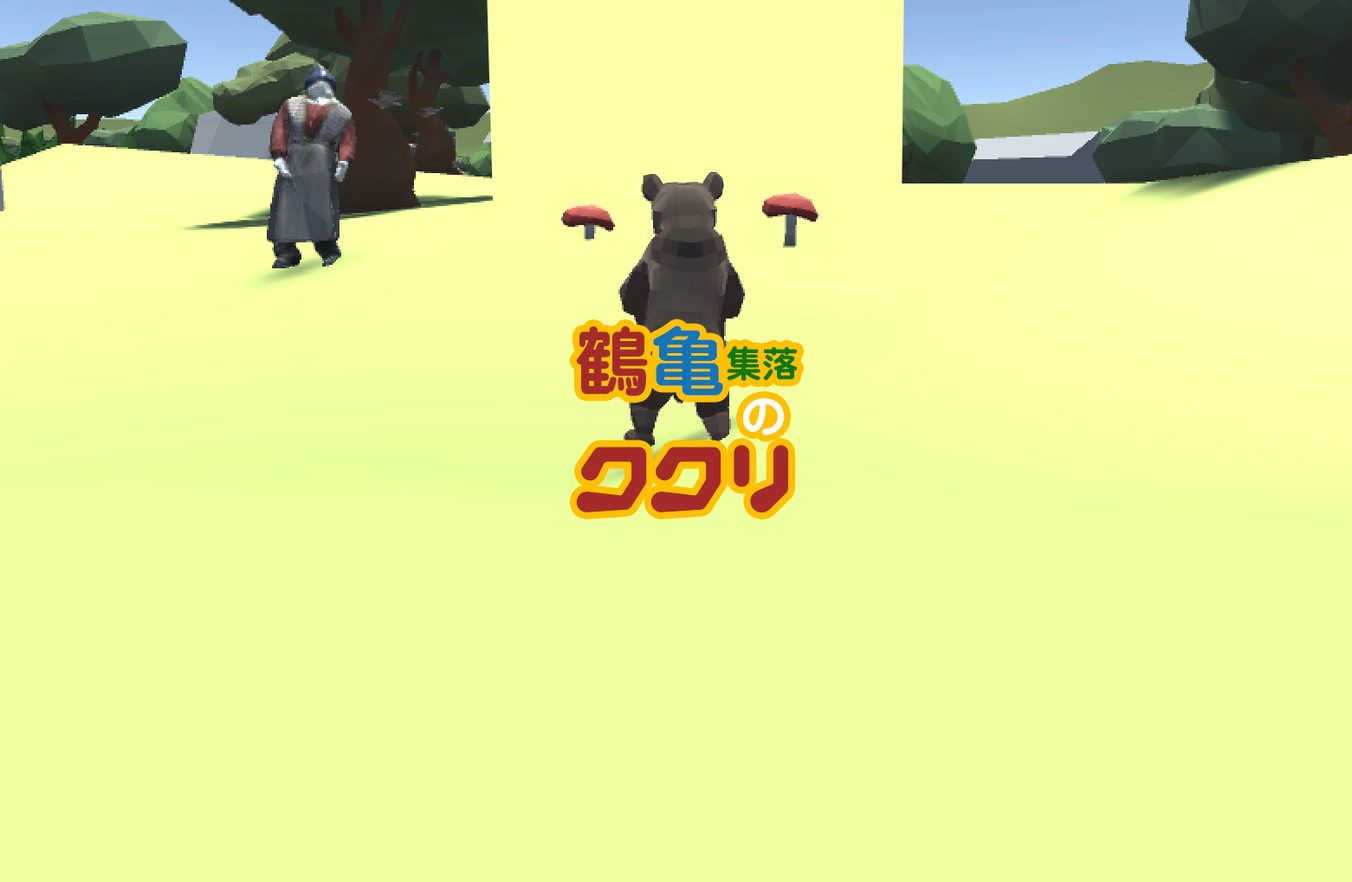
<style>
.page{position:relative;width:1352px;height:882px;background:#eeff9f}
.page>*{position:absolute;margin:0}
.t1{font:92.6px/52.8px "mitubachi";letter-spacing:-0.2em;color:#a52b2b}
.t2{font:75.3px/69.3px "Jun501Pro-Bold";color:#a52b2b}
.t3{font:75.3px/69.3px "Jun501Pro-Bold";color:#1575b8}
.t4{font:36.3px/69.3px "Jun501Pro-Bold";color:#0c790e}
.t5{font:45.8px/37.2px "Jun501Pro-Bold";color:#ffffff}
</style>
<div class="page">
<p class="t1" style="left:576px;top:326px;width:221px;height:187px;text-align:center"><span class="t2">鶴</span><span class="t3">亀</span><span class="t4">集落<br></span><span class="t5">          の<br></span>ククリ</p>
</div>
